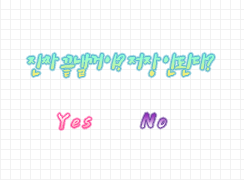
<style>
.page{position:relative;width:244px;height:180px;background:#ffffff}
.page>*{position:absolute;margin:0}
.t1{font:24px "Crayon";letter-spacing:-0.1em;font-style:italic;scale:0.8 1}
</style>
<div class="page">
<p class="t1" style="left:27px;top:53px;width:187px;height:25px">진짜  끝낼꺼야? 저장 안된다?</p>
</div>
